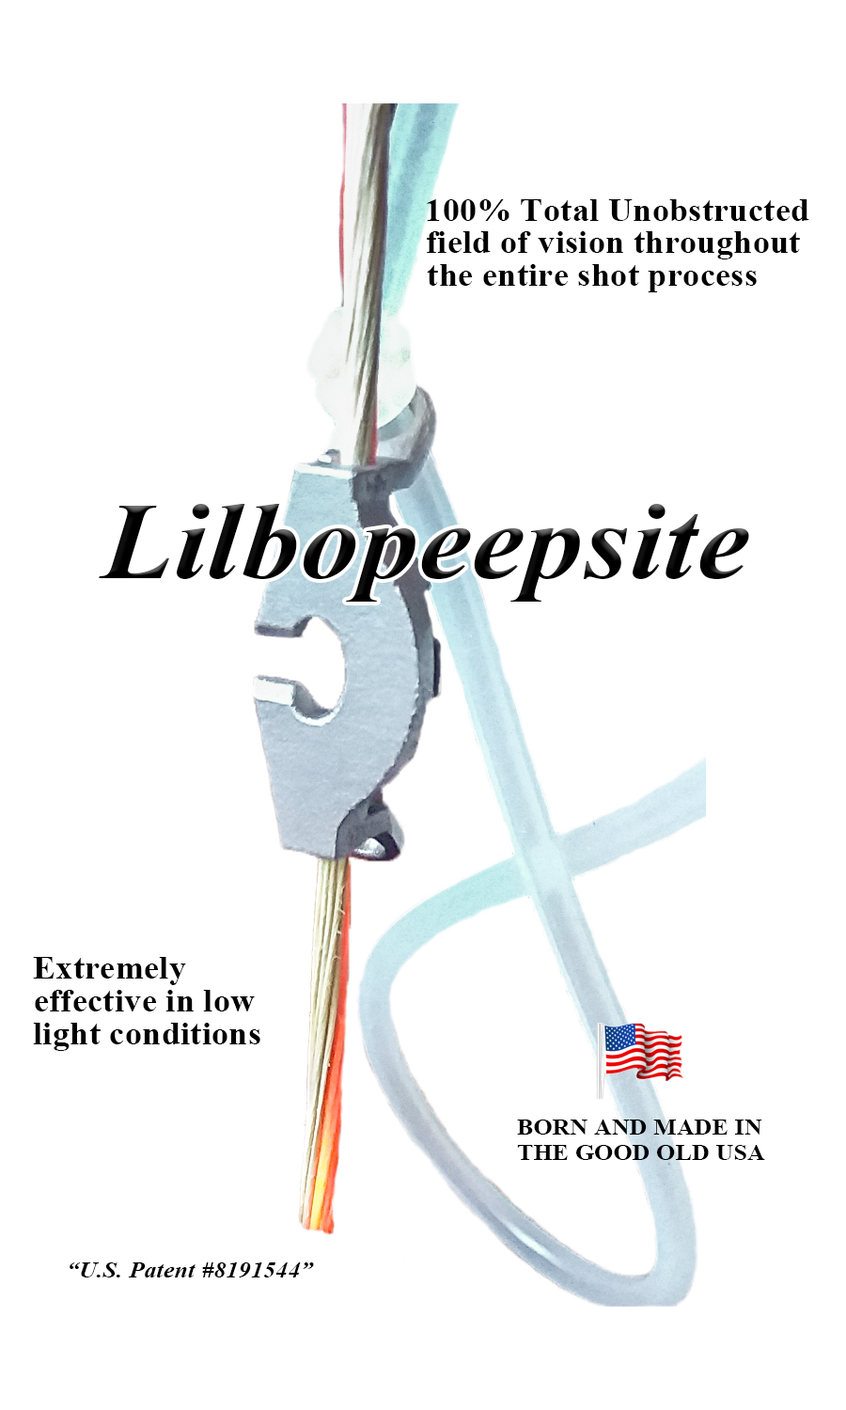
<style>
.page{position:relative;width:846px;height:1410px;background:#ffffff}
.page>*{position:absolute;margin:0}
.t1{font:54.8px "TimesNewRomanPS-BoldMT";letter-spacing:0.01em;color:#000000;scale:1.06 1}
.t2{font:188px "TimesNewRomanPS-BoldItalicMT";letter-spacing:0.01em;color:#000000;scale:1.06 1}
.t3{font:39.2px "TimesNewRomanPS-BoldMT";letter-spacing:0.01em;color:#000000;scale:1.06 1}
.t4{font:39.2px "TimesNewRomanPS-BoldItalicMT";letter-spacing:0.01em;color:#000000;scale:1.06 1}
</style>
<div class="page">
<p class="t1" style="left:427px;top:199px;width:382px;height:22px">100% Total Unobstructed</p>
<p class="t1" style="left:427px;top:231px;width:373px;height:28px">field of vision throughout</p>
<p class="t1" style="left:427px;top:264px;width:330px;height:28px">the entire shot process</p>
<p class="t2" style="left:99px;top:504px;width:650px;height:97px">Lilbopeepsite</p>
<p class="t1" style="left:33px;top:957px;width:153px;height:28px">Extremely</p>
<p class="t1" style="left:35px;top:990px;width:220px;height:21px">effective in low</p>
<p class="t1" style="left:33px;top:1023px;width:227px;height:28px">light conditions</p>
<p class="t3" style="left:517px;top:1119px;width:245px;height:15px">BORN AND MADE IN</p>
<p class="t3" style="left:517px;top:1145px;width:248px;height:15px">THE GOOD OLD USA</p>
<p class="t4" style="left:70px;top:1262px;width:244px;height:15px">“U.S. Patent #8191544”</p>
</div>
